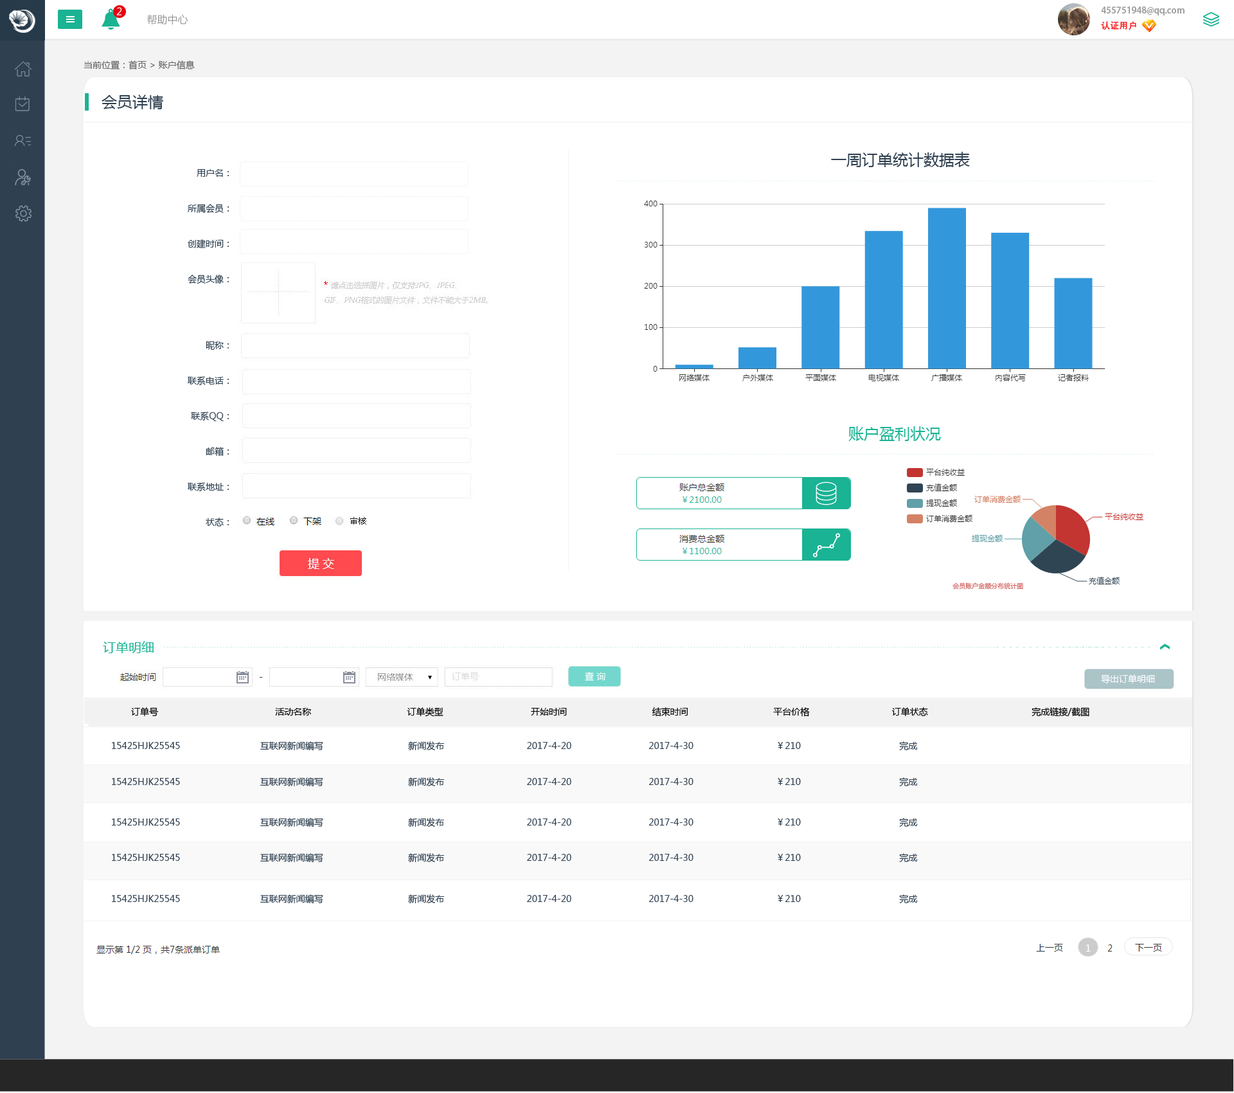
<style>
.page{position:relative;width:1234px;height:1093px;background:#ffffff}
.page>*{position:absolute;margin:0}
.t1{font:10.3px "MicrosoftYaHei";color:#ffffff}
.t2{font:10.3px "MicrosoftYaHei";color:#999999}
.t3{font:9px/15.4px "AdobeHeitiStd-Regular";color:#999999}
.t4{font:9px/15.4px "AdobeHeitiStd-Regular";color:#f61e1e}
.t5{font:9px/15.4px "AdobeHeitiStd-Regular";color:#ffffff}
.t6{font:9px "MicrosoftYaHei";color:#666666}
.t7{font:15.4px "MicrosoftYaHei";color:#2f4050}
.t8{font:9px/35.4px "MicrosoftYaHei";color:#2f4050}
.t9{font:15.4px "MicrosoftYaHei";color:#1ab394}
.t10{font:6.4px "MicrosoftYaHei";color:#cf615e}
.t11{font:12.9px "MicrosoftYaHei";color:#1ab394}
.t12{font:9px "MicrosoftYaHei";color:#ffffff}
.t13{font:9px "MicrosoftYaHei";color:#000000}
.t14{font:9px "MicrosoftYaHei";color:#2f4050}
</style>
<div class="page">
<p class="t1" style="left:116px;top:7px;width:6px;height:8px">2</p>
<p class="t2" style="left:147px;top:14px;width:41px;height:11px">帮助中心</p>
<p class="t3" style="left:1101px;top:6px;width:84px;height:24px">455751948@qq.com<br><span class="t4">认证用户               </span><span class="t5">退出</span></p>
<p class="t6" style="left:84px;top:60px;width:111px;height:9px">当前位置：首页 &gt; 账户信息</p>
<p class="t7" style="left:102px;top:94px;width:61px;height:15px">会员详情</p>
<p class="t7" style="left:831px;top:152px;width:139px;height:15px">一周订单统计数据表</p>
<p class="t8" style="left:188px;top:169px;width:41px;height:357px;text-align:right">用户名：<br>所属会员：<br>创建时间：<br>会员头像：<br><br><br>昵称：<br>联系电话：<br>联系QQ：<br>邮箱：<br>联系地址：<br>状态：</p>
<p class="t9" style="left:849px;top:426px;width:92px;height:15px">账户盈利状况</p>
<p class="t10" style="left:953px;top:582px;width:70px;height:8px">会员账户金额分布统计图</p>
<p class="t11" style="left:103px;top:641px;width:51px;height:12px">订单明细</p>
<p class="t12" style="left:1101px;top:674px;width:54px;height:9px">导出订单明细</p>
<p class="t13" style="left:131px;top:707px;width:959px;height:10px">订单号                                            活动名称                                    订单类型                                 开始时间                                结束时间                                平台价格                               订单状态                                       完成链接/截图</p>
<p class="t14" style="left:112px;top:741px;width:806px;height:9px">15425HJK25545                              互联网新闻编写                                新闻发布                               2017-4-20                             2017-4-30                               ￥210                                     完成</p>
<p class="t14" style="left:112px;top:777px;width:806px;height:9px">15425HJK25545                              互联网新闻编写                                新闻发布                               2017-4-20                             2017-4-30                               ￥210                                     完成</p>
<p class="t14" style="left:112px;top:818px;width:806px;height:9px">15425HJK25545                              互联网新闻编写                                新闻发布                               2017-4-20                             2017-4-30                               ￥210                                     完成</p>
<p class="t14" style="left:112px;top:853px;width:806px;height:9px">15425HJK25545                              互联网新闻编写                                新闻发布                               2017-4-20                             2017-4-30                               ￥210                                     完成</p>
<p class="t14" style="left:112px;top:894px;width:806px;height:9px">15425HJK25545                              互联网新闻编写                                新闻发布                               2017-4-20                             2017-4-30                               ￥210                                     完成</p>
</div>
